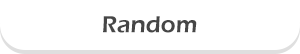
<style>
.page{position:relative;width:300px;height:54px;background:#ffffff}
.page>*{position:absolute;margin:0}
.t1{font:24px "ErasITC-Demi";color:#464646}
</style>
<div class="page">
<p class="t1" style="left:103px;top:16px;width:94px;height:17px">Random</p>
</div>
